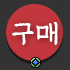
<style>
.page{position:relative;width:70px;height:70px;background:#333333}
.page>*{position:absolute;margin:0}
.t1{font:26.7px "ChosunCentennial";letter-spacing:-0.01em;color:#ffffff}
</style>
<div class="page">
<p class="t1" style="left:12px;top:22px;width:46px;height:23px">구매</p>
</div>
